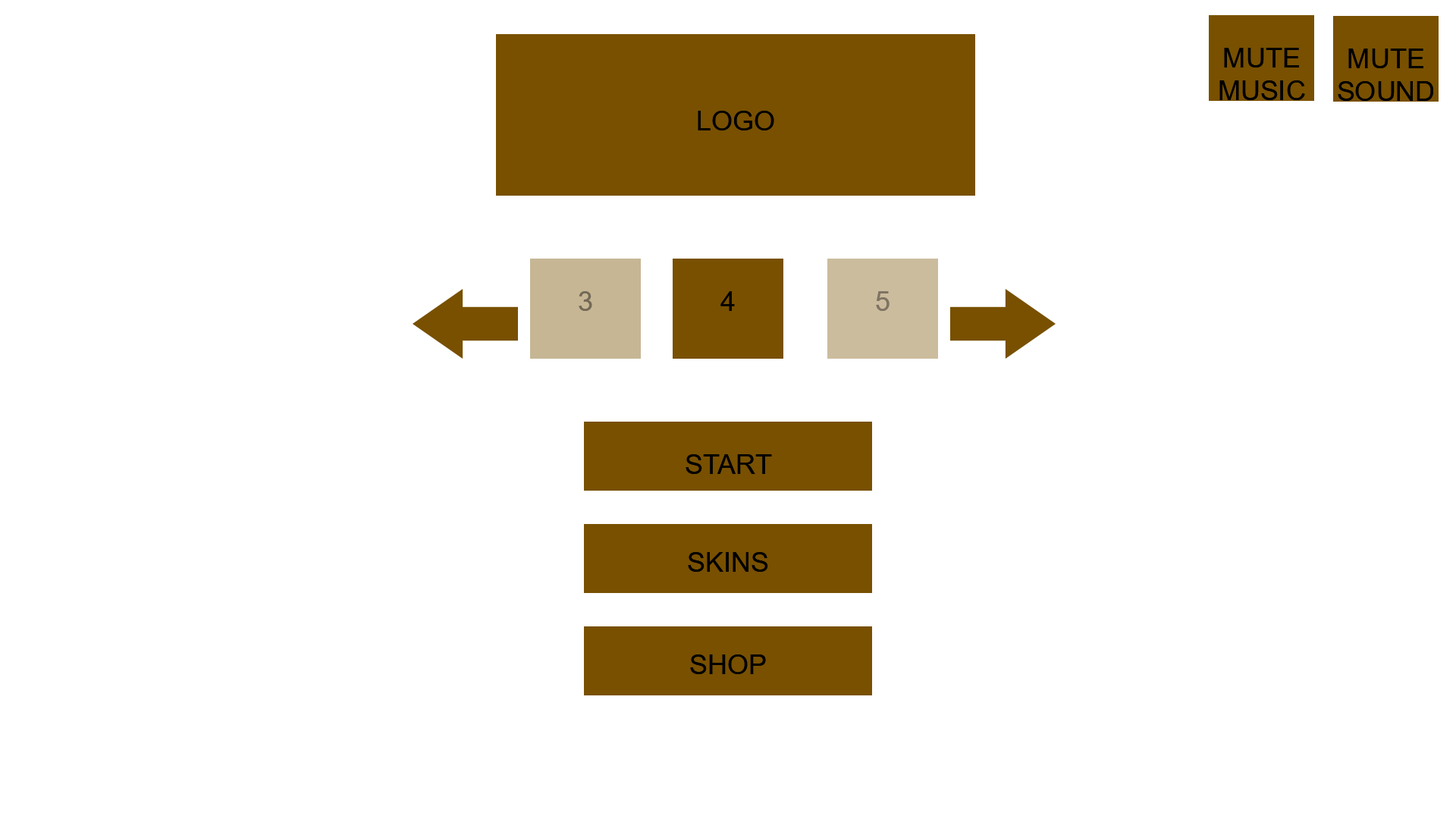
<style>
.page{position:relative;width:1456px;height:819px;background:#ffffff}
.page>*{position:absolute;margin:0}
.t1{font:27.3px "ArialMT";color:#000000}
.t2{font:20.5px "ArialMT";color:#000000}
.t3{font:27.3px "ArialMT";color:#736a56}
.t4{font:27.3px "ArialMT";color:#7e7462}
</style>
<div class="page">
<p class="t1" style="left:1219px;top:48px;width:86px;height:52px;text-align:center">MUTE<br>MUSIC</p>
<p class="t1" style="left:1338px;top:49px;width:95px;height:52px;text-align:center">MUTE SOUND</p>
<p class="t1" style="left:698px;top:111px;width:76px;height:19px"><span class="t2"><br><br><br></span>LOGO</p>
<p class="t3" style="left:579px;top:291px;width:13px;height:20px">3</p>
<p class="t1" style="left:720px;top:291px;width:15px;height:20px">4</p>
<p class="t4" style="left:876px;top:291px;width:14px;height:20px">5</p>
<p class="t1" style="left:686px;top:454px;width:86px;height:20px">START</p>
<p class="t1" style="left:688px;top:552px;width:80px;height:20px">SKINS</p>
<p class="t1" style="left:690px;top:654px;width:76px;height:20px">SHOP</p>
</div>
